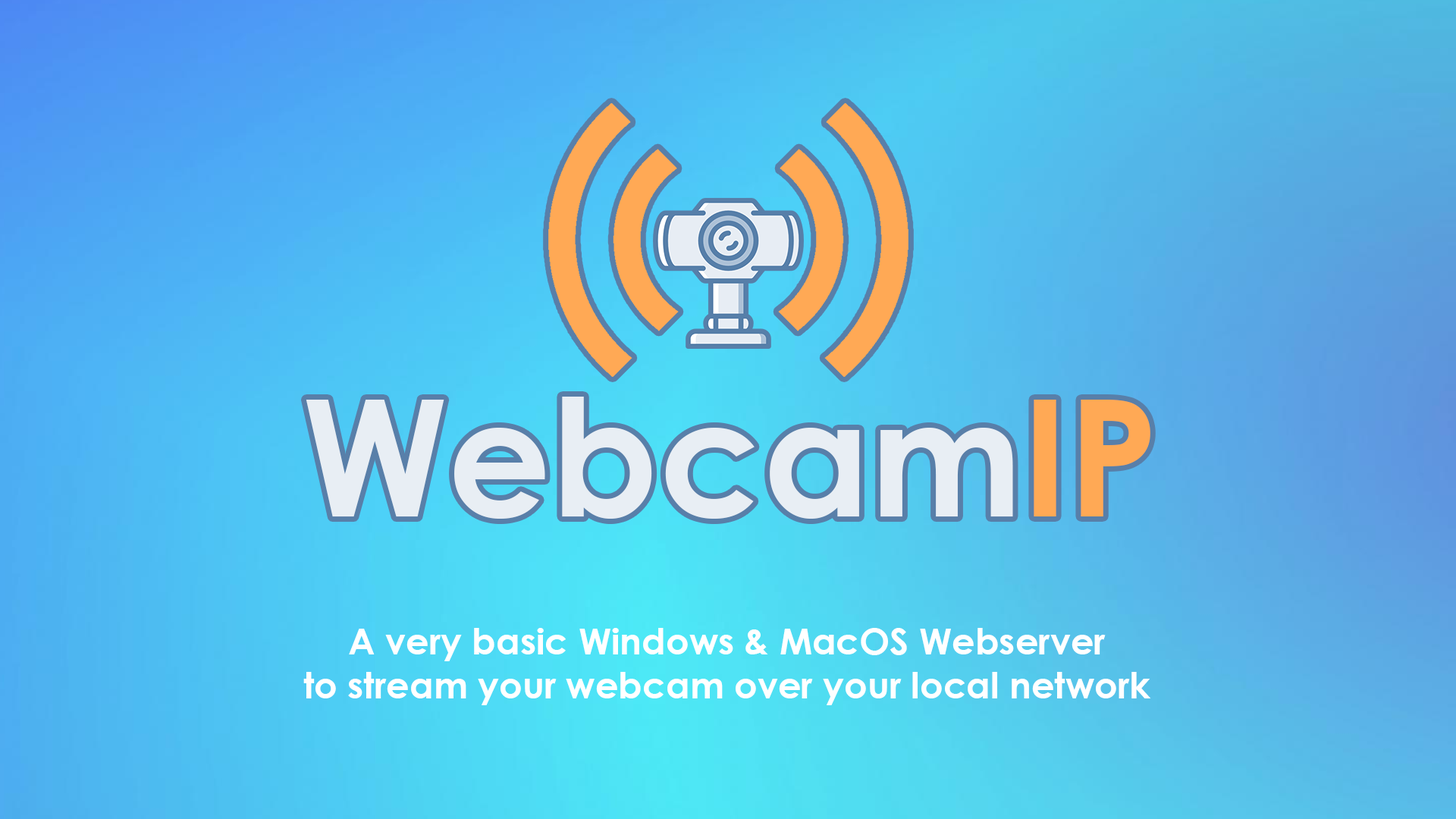
<style>
.page{position:relative;width:1456px;height:819px}
.page>*{position:absolute;margin:0}
.t1{font:162.3px "CenturyGothic-Bold";color:#e8eef4}
.t2{font:162.3px "CenturyGothic-Bold";color:#ffa955}
.t3{font:36.4px "CenturyGothic-Bold";color:#ffffff}
</style>
<div class="page">
<p class="t1" style="left:306px;top:397px;width:844px;height:122px">Webcam<span class="t2">IP</span></p>
<p class="t3" style="left:303px;top:628px;width:848px;height:77px;text-align:center">A very basic Windows &amp; MacOS Webserver<br>to stream your webcam over your local network</p>
</div>
